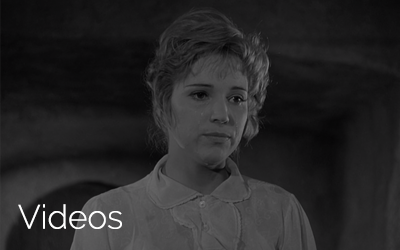
<style>
.page{position:relative;width:400px;height:250px}
.page>*{position:absolute;margin:0}
.t1{font:33.3px "Raleway-Light";color:#ffffff}
</style>
<div class="page">
<p class="t1" style="left:18px;top:204px;width:104px;height:25px">Videos</p>
</div>
